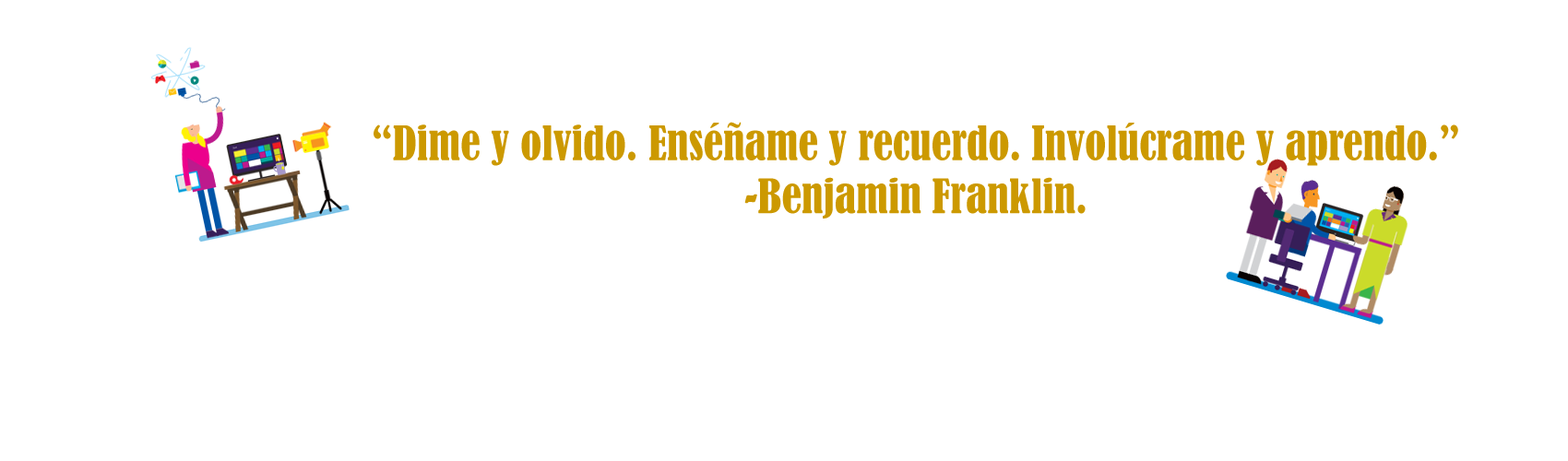
<style>
.page{position:relative;width:1568px;height:461px;background:#ffffff}
.page>*{position:absolute;margin:0}
.t1{font:44.3px "BernardMT-Condensed";color:#cc9900}
</style>
<div class="page">
<p class="t1" style="left:374px;top:122px;width:1084px;height:97px;text-align:center">“Dime y olvido. Enséñame y recuerdo. Involúcrame y aprendo.”<br>-Benjamin Franklin.</p>
</div>
